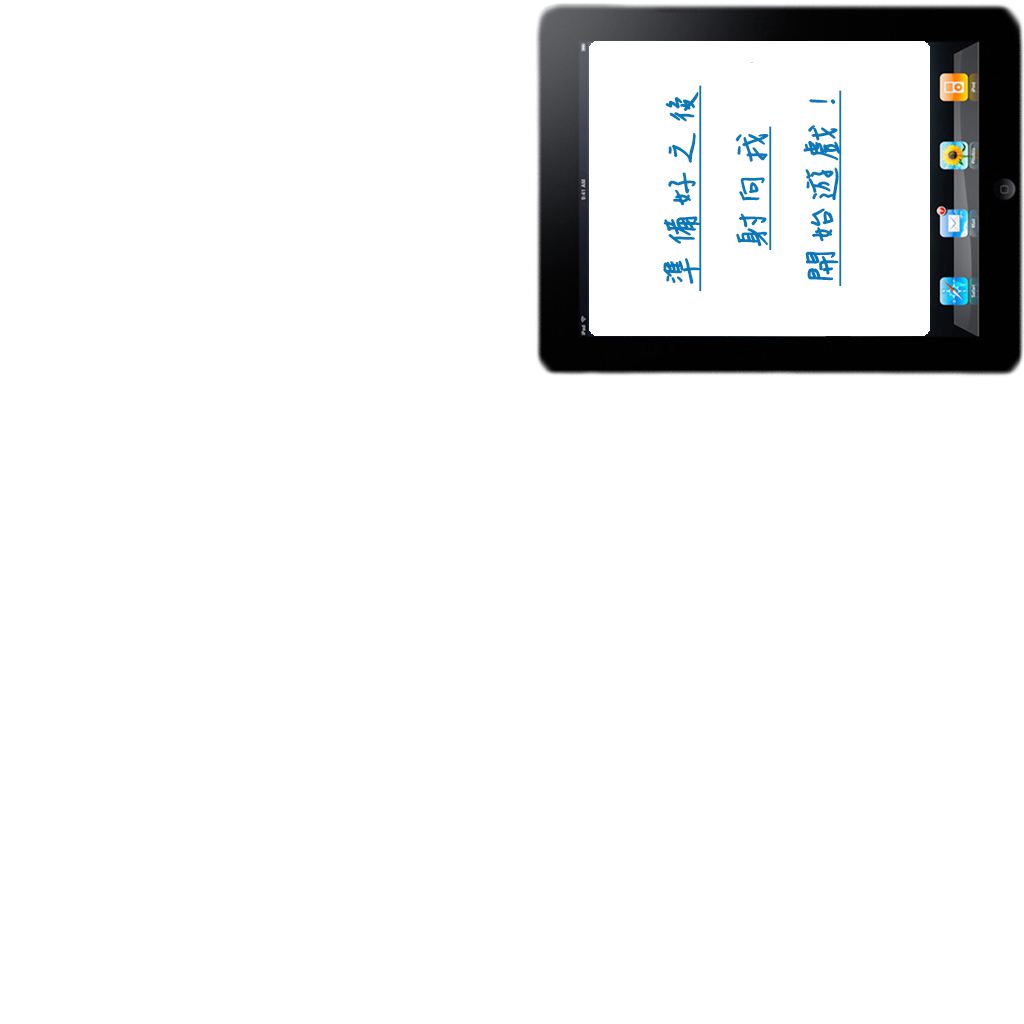
<style>
.page{position:relative;width:1024px;height:1024px;background:#ffffff}
.page>*{position:absolute;margin:0}
.t1{font:40px "DFHsiu-W3-WIN-BF";color:#0979ba;font-weight:bold;text-decoration:underline}
</style>
<div class="page">
<p class="t1" style="left:663px;top:85px;width:179px;height:206px;text-align:center;rotate:-90deg">準備好之後<br>射向我<br>開始遊戲!</p>
</div>
